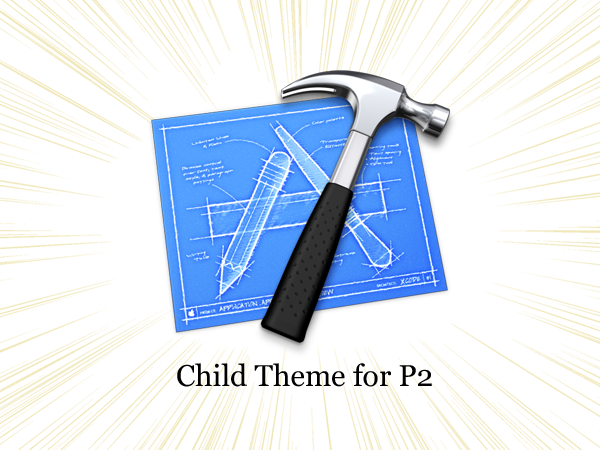
<style>
.page{position:relative;width:600px;height:450px;background:#ffffff}
.page>*{position:absolute;margin:0}
.t1{font:30px "Georgia";color:#000000}
</style>
<div class="page">
<p class="t1" style="left:177px;top:363px;width:255px;height:24px">Child Theme for P2</p>
</div>
